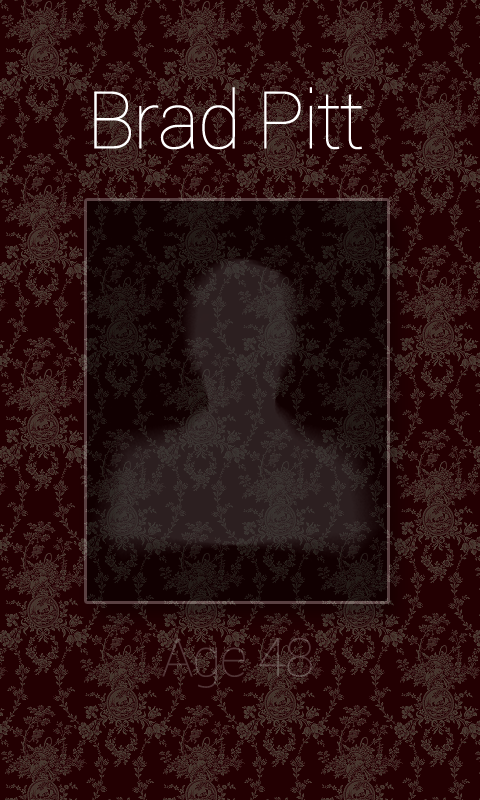
<style>
.page{position:relative;width:480px;height:800px;background:#230002}
.page>*{position:absolute;margin:0}
.t1{font:80px "Roboto-Thin";letter-spacing:-0.025em;color:#ffffff}
</style>
<div class="page">
<p class="t1" style="left:94px;top:87px;width:268px;height:63px">Brad Pitt</p>
</div>
